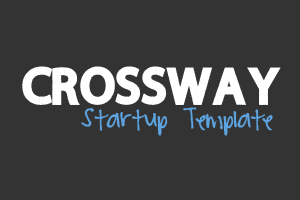
<style>
.page{position:relative;width:300px;height:200px;background:#333333}
.page>*{position:absolute;margin:0}
.t1{font:72px "WildScratch";color:#ffffff}
.t2{font:20px "PeaMountainGrits";color:#5ca3e0}
</style>
<div class="page">
<p class="t1" style="left:22px;top:66px;width:259px;height:39px">CROSSWAY</p>
<p class="t2" style="left:81px;top:107px;width:192px;height:29px">Startup Template</p>
</div>
